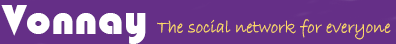
<style>
.page{position:relative;width:396px;height:44px;background:#652f87}
.page>*{position:absolute;margin:0}
.t1{font:44px "Bauhaus93";color:#ffffff}
.t2{font:18px "BradleyHandITC";color:#ffd965}
</style>
<div class="page">
<p class="t1" style="left:1px;top:5px;width:145px;height:39px">Vonnay</p>
<p class="t2" style="left:157px;top:19px;width:234px;height:21px">The social network for everyone</p>
</div>
